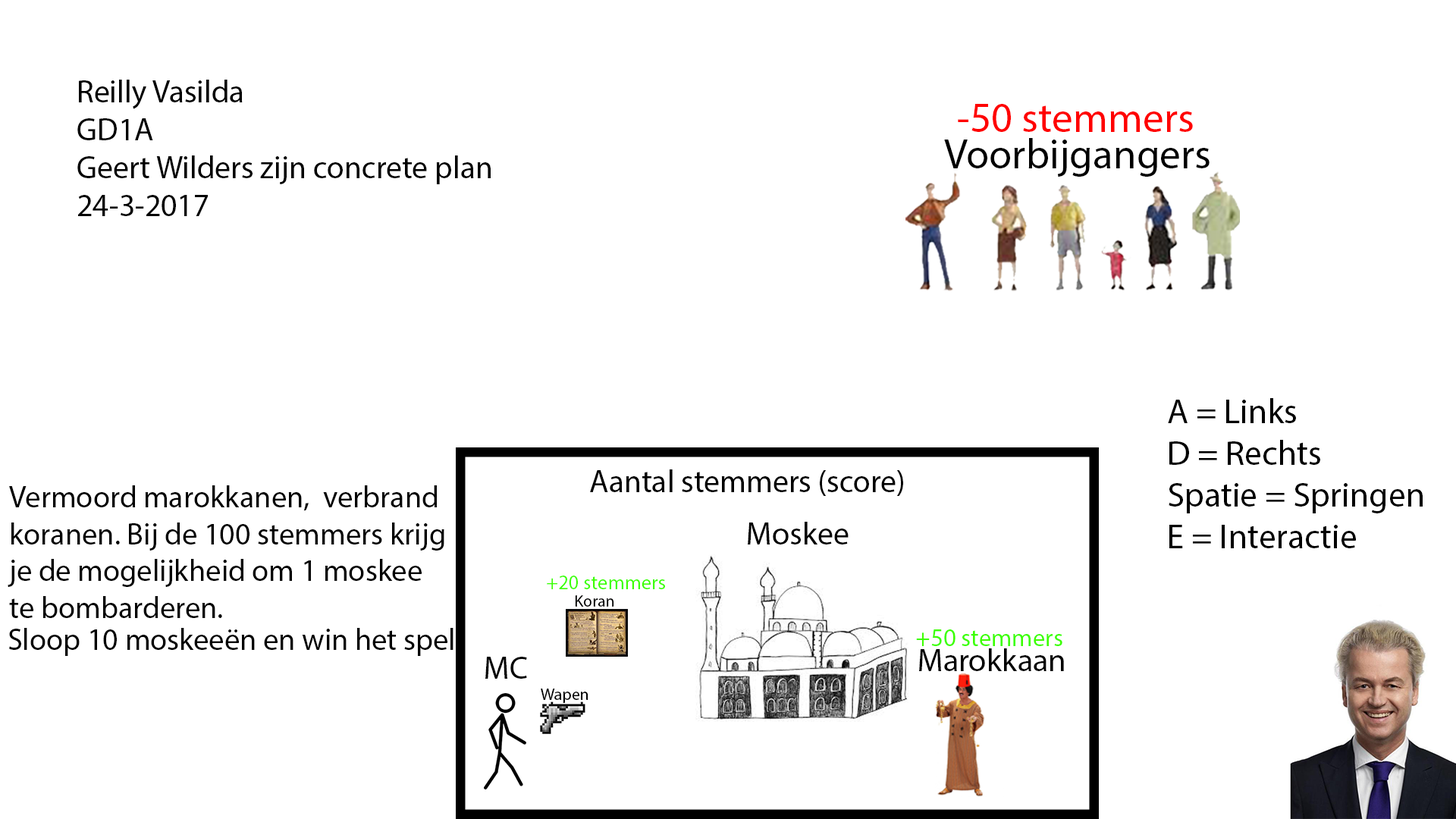
<style>
.page{position:relative;width:1456px;height:819px;background:#ffffff}
.page>*{position:absolute;margin:0}
.t1{font:31.6px "MyriadPro-Regular";color:#000000}
.t2{font:41.9px "MyriadPro-Regular";color:#ff0000}
.t3{font:41.9px "MyriadPro-Regular";color:#000000}
.t4{font:34.8px "MyriadPro-Regular";color:#000000}
.t5{font:30.6px "MyriadPro-Regular";color:#000000}
.t6{font:32px "MyriadPro-Regular";color:#000000}
.t7{font:20.1px "MyriadPro-Regular";color:#3cff00}
.t8{font:16.6px "MyriadPro-Regular";color:#000000}
.t9{font:24.7px "MyriadPro-Regular";color:#3cff00}
.t10{font:16.7px "MyriadPro-Regular";color:#000000}
</style>
<div class="page">
<p class="t1" style="left:77px;top:80px;width:414px;height:136px">Reilly Vasilda <br>GD1A<br>Geert Wilders zijn concrete plan<br>24-3-2017</p>
<p class="t2" style="left:958px;top:104px;width:235px;height:28px">-50 stemmers</p>
<p class="t3" style="left:944px;top:138px;width:266px;height:39px">Voorbijgangers</p>
<p class="t4" style="left:1168px;top:398px;width:255px;height:150px">A = Links<br>D = Rechts<br>Spatie = Springen<br>E = Interactie</p>
<p class="t1" style="left:590px;top:469px;width:313px;height:27px">Aantal stemmers (score)</p>
<p class="t5" style="left:8px;top:485px;width:436px;height:133px">Vermoord marokkanen,  verbrand koranen. Bij de 100 stemmers krijg je de mogelijkheid om 1 moskee te bombarderen.</p>
<p class="t6" style="left:748px;top:522px;width:101px;height:22px">Moskee</p>
<p class="t7" style="left:547px;top:576px;width:118px;height:13px">+20 stemmers</p>
<p class="t8" style="left:575px;top:595px;width:39px;height:12px">Koran</p>
<p class="t5" style="left:9px;top:628px;width:444px;height:28px">Sloop 10 moskeeën en win het spel</p>
<p class="t9" style="left:916px;top:629px;width:146px;height:17px">+50 stemmers</p>
<p class="t6" style="left:919px;top:648px;width:145px;height:23px">Marokkaan</p>
<p class="t6" style="left:485px;top:657px;width:42px;height:22px">MC</p>
<p class="t10" style="left:541px;top:689px;width:47px;height:14px">Wapen</p>
</div>
